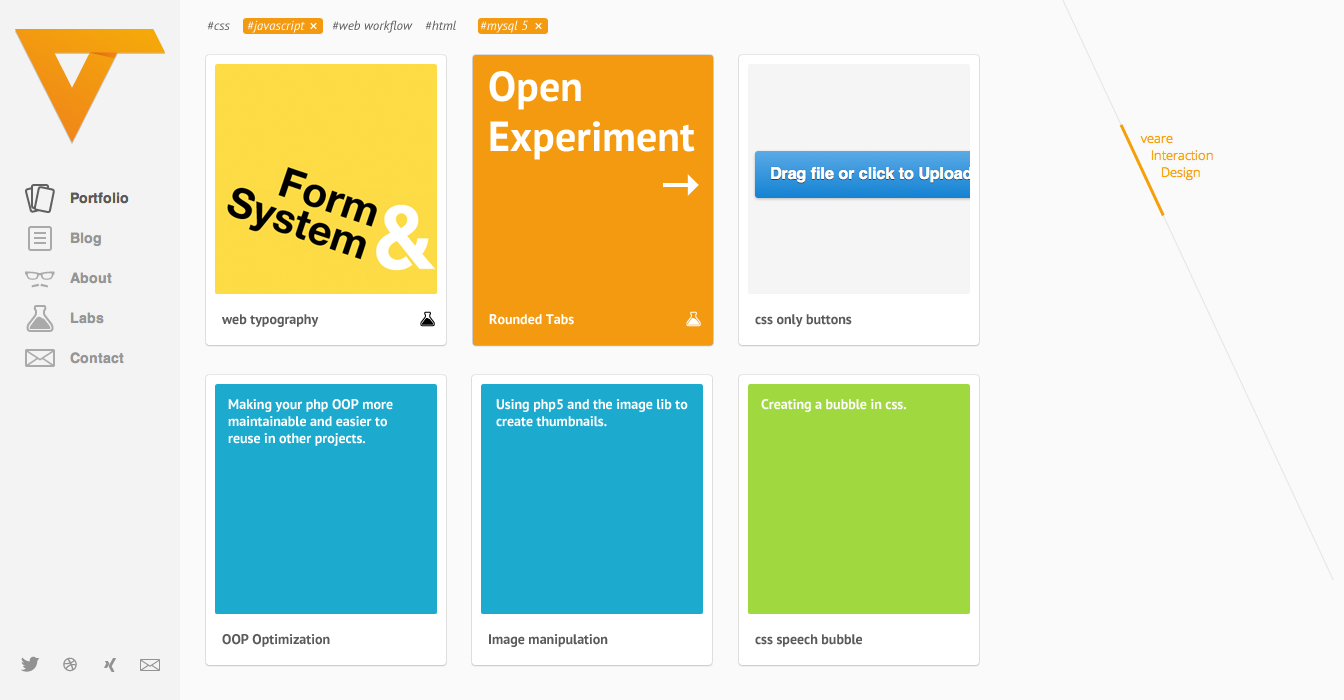
<style>
.page{position:relative;width:1344px;height:700px;background:#fafafa}
.page>*{position:absolute;margin:0}
.t1{font:13px "PTSans-Italic";color:#5a5a5a}
.t2{font:13px "PTSans-Italic";color:#ffffff}
.t3{font:18px "PTSans-Italic";color:#ffffff}
.t4{font:42px/50px "PTSans-Bold";color:#ffffff}
.t5{font:14px "PTSans-Bold";color:#5a5a5a}
.t6{font:14px "PTSans-Bold";color:#ffffff}
</style>
<div class="page">
<p class="t1" style="left:207px;top:21px;width:23px;height:9px">#css</p>
<p class="t2" style="left:247px;top:20px;width:58px;height:13px">#javascript</p>
<p class="t3" style="left:310px;top:22px;width:7px;height:8px">×</p>
<p class="t1" style="left:332px;top:20px;width:81px;height:13px">#web workflow</p>
<p class="t1" style="left:425px;top:20px;width:31px;height:10px">#html</p>
<p class="t2" style="left:480px;top:20px;width:48px;height:13px">#mysql 5</p>
<p class="t3" style="left:535px;top:22px;width:7px;height:8px">×</p>
<p class="t4" style="left:489px;top:71px;width:206px;height:89px">Open<br>Experiment</p>
<p class="t5" style="left:222px;top:314px;width:97px;height:13px">web typography</p>
<p class="t6" style="left:489px;top:314px;width:85px;height:11px">Rounded Tabs</p>
<p class="t5" style="left:755px;top:314px;width:97px;height:13px">css only buttons</p>
<p class="t6" style="left:228px;top:399px;width:165px;height:47px">Making your php OOP more<br>maintainable and easier to <br>reuse in other projects.</p>
<p class="t6" style="left:496px;top:399px;width:192px;height:28px">Using php5 and the image lib to<br>create thumbnails.</p>
<p class="t6" style="left:761px;top:399px;width:145px;height:13px">Creating a bubble in css.</p>
<p class="t5" style="left:222px;top:634px;width:108px;height:13px">OOP Optimization</p>
<p class="t5" style="left:489px;top:634px;width:119px;height:13px">Image manipulation</p>
<p class="t5" style="left:755px;top:634px;width:107px;height:13px">css speech bubble</p>
</div>
